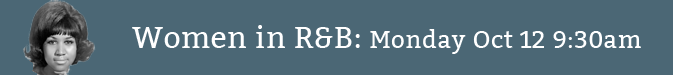
<style>
.page{position:relative;width:673px;height:75px;background:#4b6775}
.page>*{position:absolute;margin:0}
.t1{font:24px "Bitter-Regular";letter-spacing:0.018em;color:#ffffff}
.t2{font:30px "Bitter-Regular";letter-spacing:0.018em;color:#ffffff}
</style>
<div class="page">
<p class="t1" style="left:132px;top:25px;width:509px;height:29px"><span class="t2">Women in R&amp;B: </span>Monday Oct 12 9:30am</p>
</div>
